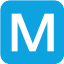
<style>
.page{position:relative;width:64px;height:64px;background:#0da3e1}
.page>*{position:absolute;margin:0}
.t1{font:55px "AppleGothic";color:#ffffff;font-weight:bold;scale:1.2 1}
</style>
<div class="page">
<p class="t1" style="left:11px;top:13px;width:43px;height:39px">M</p>
</div>
